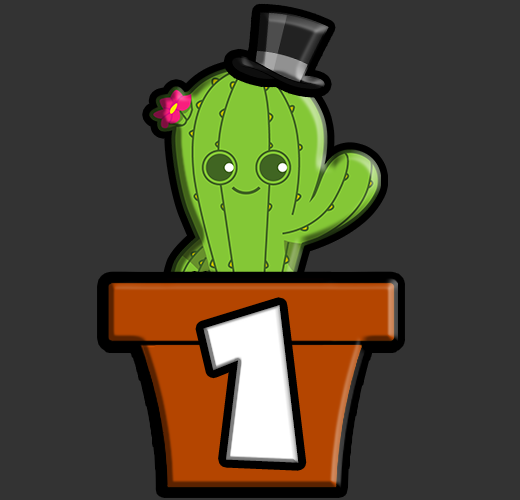
<style>
.page{position:relative;width:520px;height:500px;background:#333333}
.page>*{position:absolute;margin:0}
.t1{font:215.4px "Funhouse";color:#ffffff}
</style>
<div class="page">
<p class="t1" style="left:203px;top:305px;width:96px;height:158px">1</p>
</div>
